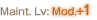
<style>
.page{position:relative;width:97px;height:20px;background:#ffffff}
.page>*{position:absolute;margin:0}
.t1{font:10px "GothicMB101Pro-DeBold";letter-spacing:-0.04em;color:#cc6719}
.t2{font:14px "GothicMB101Pro-DeBold";letter-spacing:-0.04em;color:#cc6719}
.t3{font:10px "GothicMB101Pro-DeBold";letter-spacing:-0.04em;color:#8b6e51}
</style>
<div class="page">
<p class="t1" style="left:52px;top:4px;width:37px;height:12px">Mod.+<span class="t2">1</span></p>
<p class="t3" style="left:0px;top:7px;width:49px;height:9px;opacity:0.9">Maint. Lv:</p>
</div>
